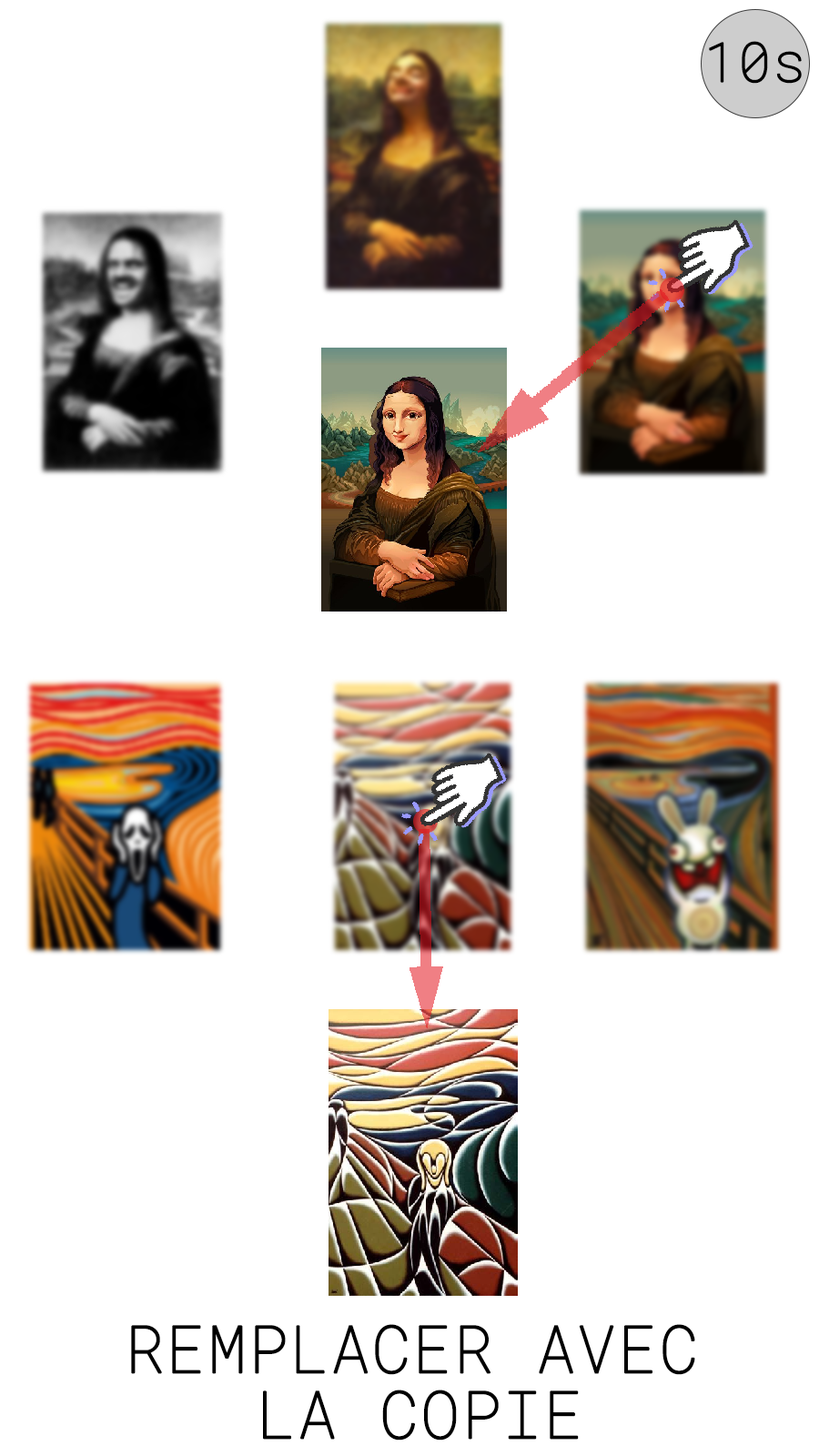
<style>
.page{position:relative;width:819px;height:1456px;background:#ffffff}
.page>*{position:absolute;margin:0}
.t1{font:65.5px/21.8px "RobotoMono-Thin";color:#000000;font-weight:bold}
</style>
<div class="page">
<p class="t1" style="left:131px;top:1324px;width:564px;height:117px">REMPLACER AVEC <br><br><br>    LA COPIE</p>
</div>
